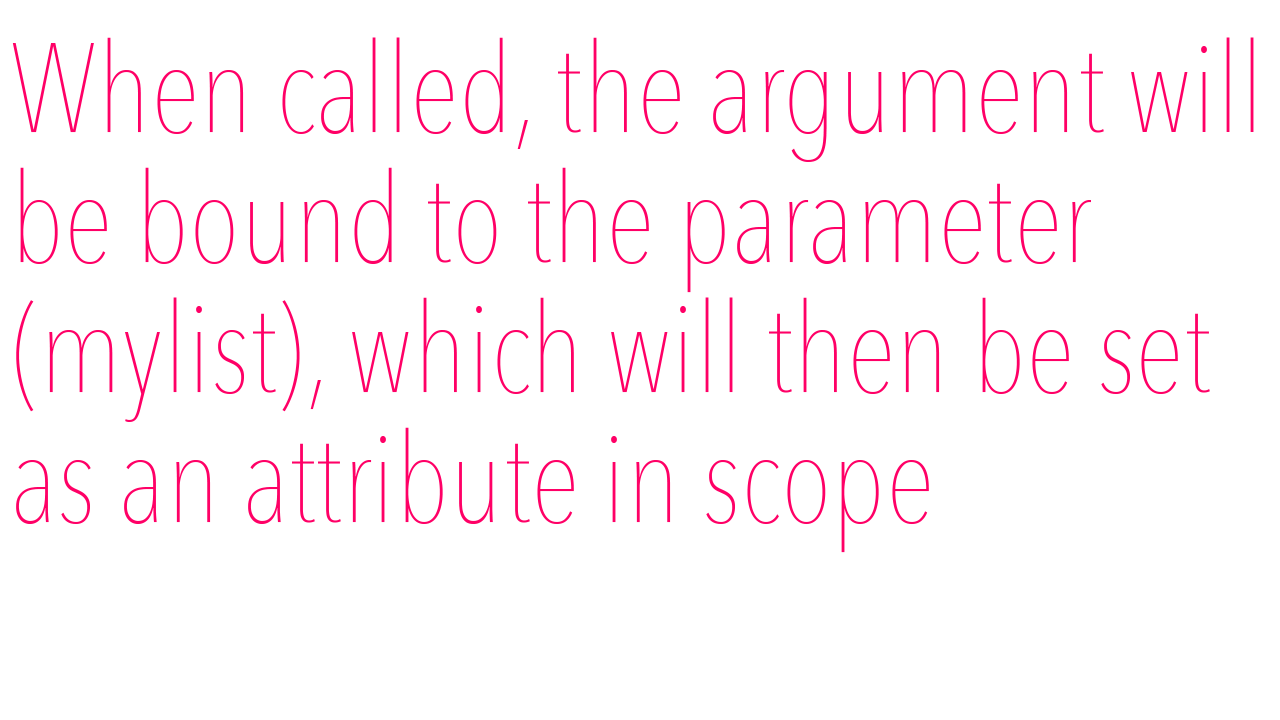
<style>
.page{position:relative;width:1280px;height:720px;background:#ffffff}
.page>*{position:absolute;margin:0}
.t1{font:125px "AvenirNextCondensed-UltraLight";color:#ff0066}
</style>
<div class="page">
<p class="t1" style="left:12px;top:37px;width:1242px;height:516px">When called, the argument will<br>be bound to the parameter<br>(mylist), which will then be set<br>as an attribute in scope</p>
</div>
